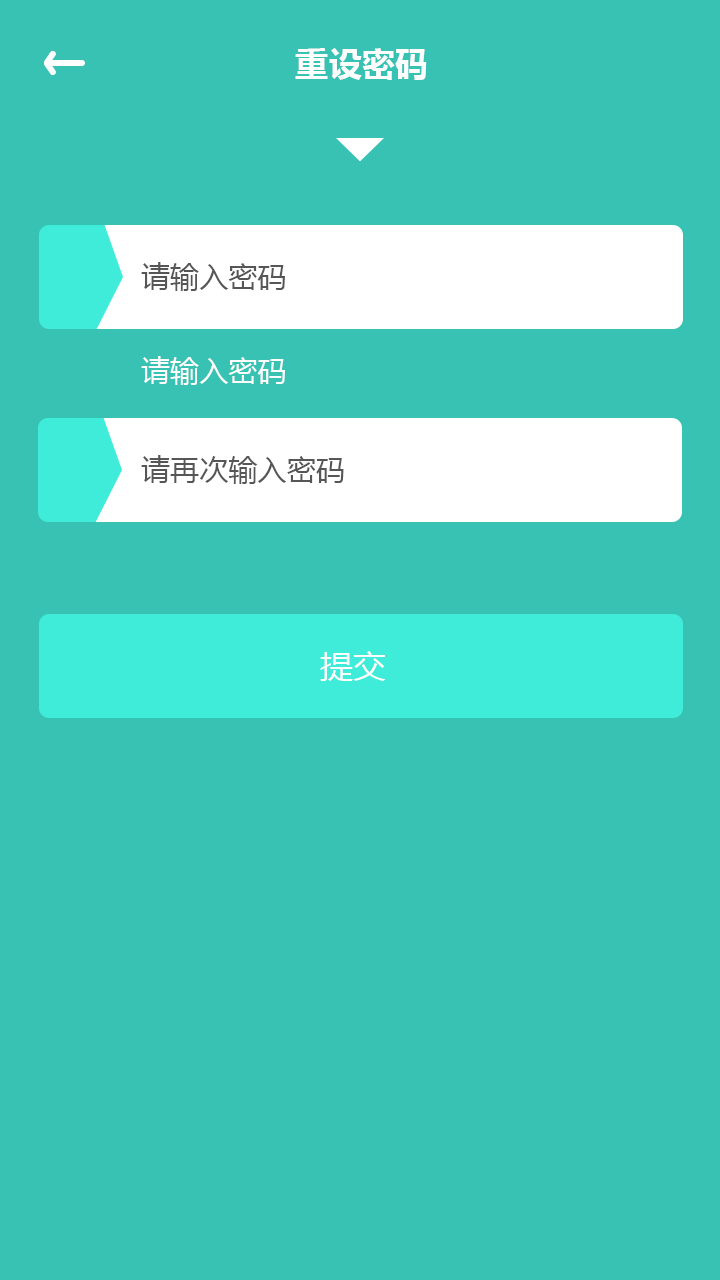
<style>
.page{position:relative;width:720px;height:1280px;background:#38c2b3}
.page>*{position:absolute;margin:0}
.t1{font:33.3px "MicrosoftYaHei-Bold";color:#fefefe}
.t2{font:29.2px "MicrosoftYaHei";color:#565656}
.t3{font:29.2px "MicrosoftYaHei";color:#fefefe}
.t4{font:33.3px "MicrosoftYaHei";color:#fefefe}
</style>
<div class="page">
<p class="t1" style="left:295px;top:48px;width:132px;height:32px">重设密码</p>
<p class="t2" style="left:141px;top:262px;width:144px;height:29px">请输入密码</p>
<p class="t3" style="left:141px;top:356px;width:144px;height:29px">请输入密码</p>
<p class="t2" style="left:141px;top:455px;width:203px;height:29px">请再次输入密码</p>
<p class="t4" style="left:320px;top:651px;width:66px;height:30px">提交</p>
</div>
